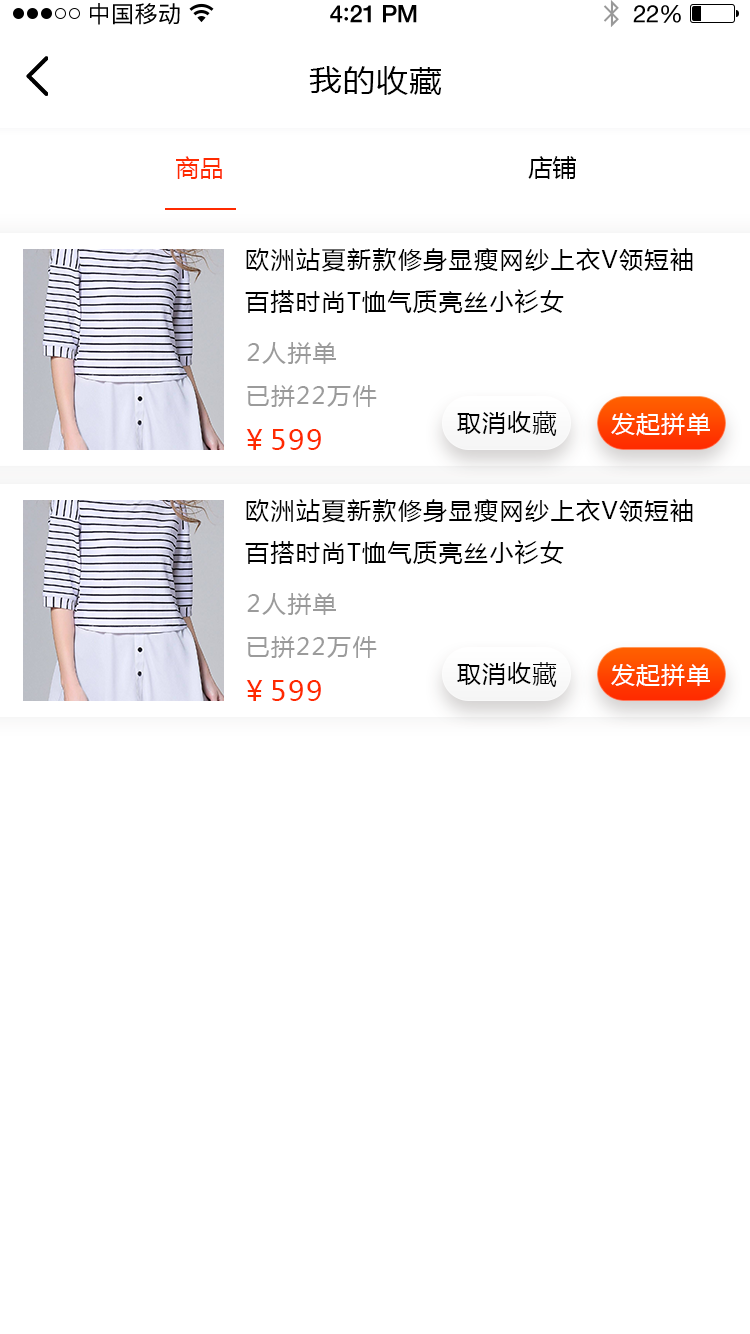
<style>
.page{position:relative;width:750px;height:1334px;background:#ffffff}
.page>*{position:absolute;margin:0}
.t1{font:23px "PingFangSC-Regular";letter-spacing:0.02em;color:#000000}
.t2{font:24px "HelveticaNeue-Medium";letter-spacing:-0.02em;color:#000000}
.t3{font:26px "Avenir-Medium";letter-spacing:-0.02em;color:#000000}
.t4{font:24px "HelveticaNeue";letter-spacing:-0.02em;color:#000000}
.t5{font:30px "MicrosoftYaHei";letter-spacing:0.05em;color:#000000;scale:1.06 1}
.t6{font:24px "MicrosoftYaHei";color:#ff2a00;text-transform:uppercase}
.t7{font:24px "MicrosoftYaHei";color:#000000;text-transform:uppercase}
.t8{font:24px "MicrosoftYaHei";letter-spacing:0.06em;color:#000000;text-transform:uppercase}
.t9{font:24px "MicrosoftYaHei";letter-spacing:0.06em;color:#9b9b9b;text-transform:uppercase}
.t10{font:24px "MicrosoftYaHei";letter-spacing:0.05em;color:#000000;text-transform:uppercase}
.t11{font:24px "MicrosoftYaHei";letter-spacing:0.05em;color:#ffffff;text-transform:uppercase}
.t12{font:28px "MicrosoftYaHei";letter-spacing:0.06em;color:#ff2a00;text-transform:uppercase}
</style>
<div class="page">
<p class="t1" style="left:90px;top:3px;width:90px;height:22px">中国移动</p>
<p class="t2" style="left:330px;top:5px;width:87px;height:18px">4<span class="t3">:</span>21 PM</p>
<p class="t4" style="left:633px;top:5px;width:48px;height:18px">22%</p>
<p class="t5" style="left:309px;top:66px;width:133px;height:29px">我的收藏</p>
<p class="t6" style="left:176px;top:156px;width:46px;height:23px">商品</p>
<p class="t7" style="left:528px;top:156px;width:48px;height:23px">店铺</p>
<p class="t8" style="left:245px;top:248px;width:448px;height:65px">欧洲站夏新款修身显瘦网纱上衣v领短袖百搭时尚t恤气质亮丝小衫女</p>
<p class="t9" style="left:247px;top:342px;width:89px;height:22px">2人拼单</p>
<p class="t9" style="left:247px;top:385px;width:130px;height:22px">已拼22万件</p>
<p class="t10" style="left:457px;top:411px;width:100px;height:25px">取消收藏</p>
<p class="t11" style="left:611px;top:413px;width:99px;height:23px">发起拼单</p>
<p class="t12" style="left:246px;top:429px;width:75px;height:21px">￥599</p>
<p class="t8" style="left:245px;top:499px;width:448px;height:65px">欧洲站夏新款修身显瘦网纱上衣v领短袖百搭时尚t恤气质亮丝小衫女</p>
<p class="t9" style="left:247px;top:593px;width:89px;height:22px">2人拼单</p>
<p class="t9" style="left:247px;top:636px;width:130px;height:22px">已拼22万件</p>
<p class="t10" style="left:457px;top:662px;width:100px;height:25px">取消收藏</p>
<p class="t11" style="left:611px;top:664px;width:99px;height:23px">发起拼单</p>
<p class="t12" style="left:246px;top:680px;width:75px;height:21px">￥599</p>
</div>
